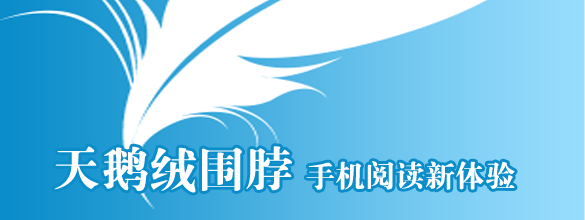
<style>
.page{position:relative;width:585px;height:220px;background:#ffffff}
.page>*{position:absolute;margin:0}
.t1{font:30px "FZDBSK--GBK1-0";color:#ffffff}
.t2{font:48px "FZDBSK--GBK1-0";color:#ffffff}
</style>
<div class="page">
<p class="t1" style="left:54px;top:146px;width:461px;height:47px"><span class="t2">天鹅绒围脖 </span>手机阅读新体验</p>
</div>
